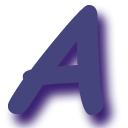
<style>
.page{position:relative;width:128px;height:128px;background:#ffffff}
.page>*{position:absolute;margin:0}
.t1{font:150px "ComicSansMS-Bold";color:#45447c;font-style:italic}
</style>
<div class="page">
<p class="t1" style="left:8px;top:5px;width:96px;height:111px">A</p>
</div>
